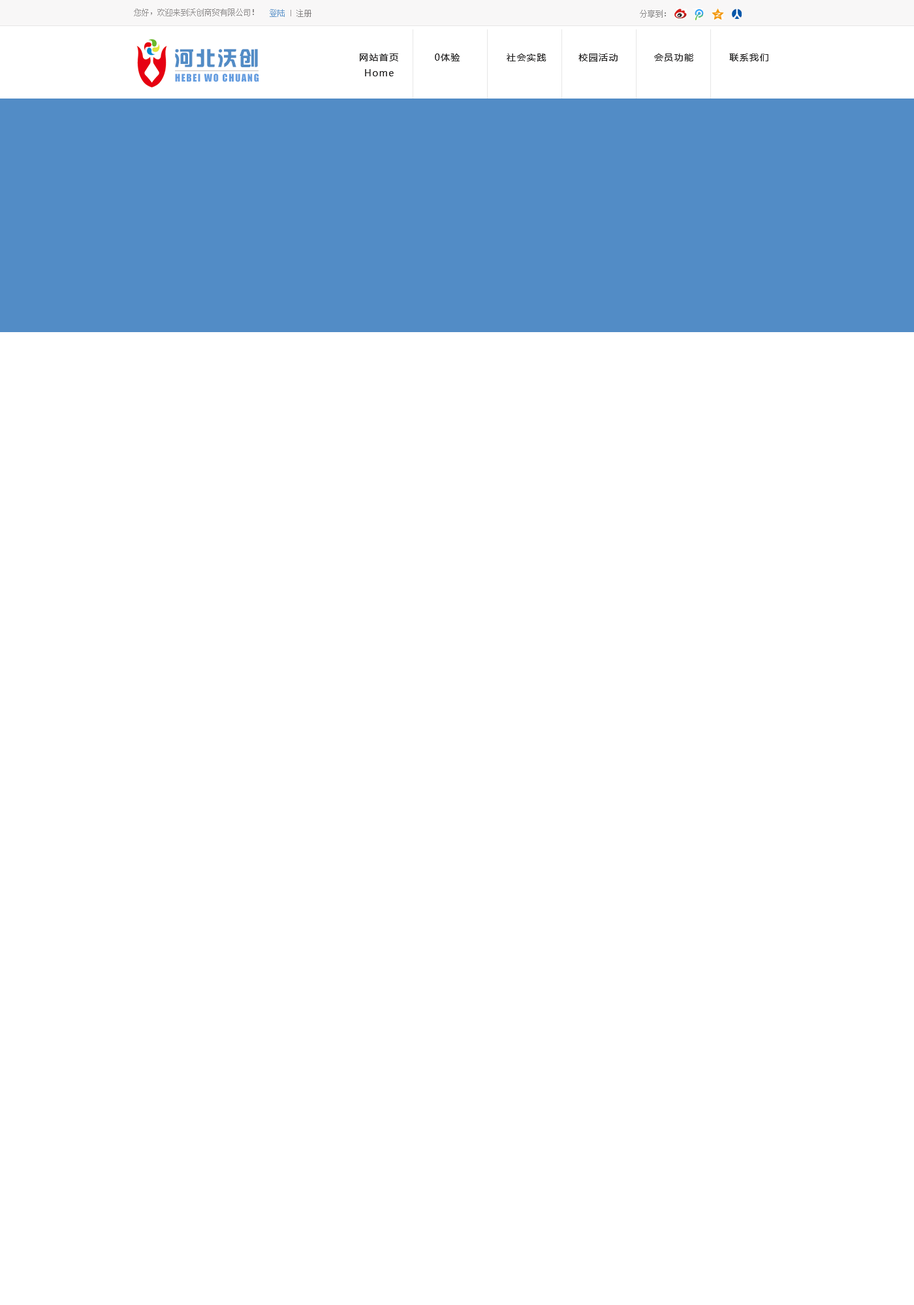
<style>
.page{position:relative;width:914px;height:1305px;background:#ffffff}
.page>*{position:absolute;margin:0}
.t1{font:7.8px "SimSun";color:#939191}
.t2{font:7.8px "SimSun";color:#6699cc}
.t3{font:6.5px "SimSun";color:#9b9999}
.t4{font:7.8px "SimSun";color:#858383}
.t5{font:7.8px "SimSun";color:#8a8989}
.t6{font:19.6px "hzgb";letter-spacing:0.1em;color:#528cc6}
.t7{font:9.1px "MicrosoftYaHei";letter-spacing:0.1em;color:#222121}
.t8{font:9.8px "Impact";letter-spacing:0.1em;color:#669ee0}
</style>
<div class="page">
<p class="t1" style="left:134px;top:8px;width:120px;height:8px">您好，欢迎来到沃创商贸有限公司！</p>
<p class="t2" style="left:270px;top:9px;width:41px;height:8px">登陆 <span class="t3">|</span><span class="t4"> 注册</span></p>
<p class="t5" style="left:640px;top:10px;width:26px;height:8px">分享到：</p>
<p class="t6" style="left:175px;top:49px;width:83px;height:18px">河北沃创</p>
<p class="t7" style="left:360px;top:54px;width:408px;height:8px">网站首页          0体验             社会实践         校园活动          会员功能          联系我们</p>
<p class="t8" style="left:175px;top:74px;width:84px;height:8px">HEBEI WO CHUANG</p>
<p class="t7" style="left:365px;top:69px;width:29px;height:7px">Home</p>
</div>
